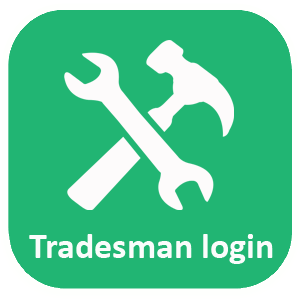
<style>
.page{position:relative;width:300px;height:300px;background:#21b573}
.page>*{position:absolute;margin:0}
.t1{font:36px "Calibri-Bold";color:#fafcfb}
</style>
<div class="page">
<p class="t1" style="left:29px;top:234px;width:244px;height:30px">Tradesman login</p>
</div>
